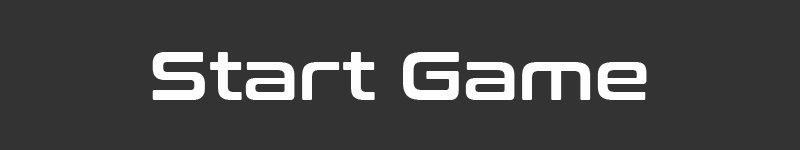
<style>
.page{position:relative;width:800px;height:150px;background:#333333}
.page>*{position:absolute;margin:0}
.t1{font:69.4px "ConthraxSb-Regular";color:#fefeff}
</style>
<div class="page">
<p class="t1" style="left:152px;top:52px;width:495px;height:48px">Start Game</p>
</div>
